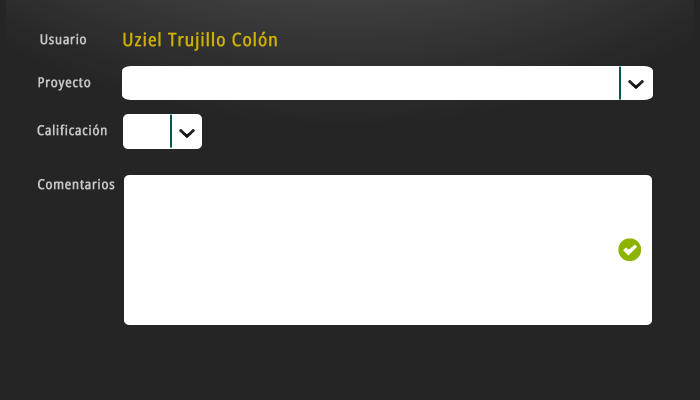
<style>
.page{position:relative;width:700px;height:400px;background:#252525}
.page>*{position:absolute;margin:0}
.t1{font:13.8px "DroidSans";letter-spacing:0.04em;color:#c6c6c6;font-weight:bold;scale:0.87 1}
.t2{font:18.4px "DroidSans";letter-spacing:0.04em;color:#cdb000;font-weight:bold;scale:0.87 1}
</style>
<div class="page">
<p class="t1" style="left:40px;top:33px;width:47px;height:12px">Usuario</p>
<p class="t2" style="left:123px;top:31px;width:154px;height:20px">Uziel Trujillo Colón</p>
<p class="t1" style="left:38px;top:77px;width:53px;height:14px">Proyecto</p>
<p class="t1" style="left:37px;top:124px;width:70px;height:12px">Calificación</p>
<p class="t1" style="left:37px;top:178px;width:78px;height:12px">Comentarios</p>
</div>
